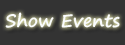
<style>
.page{position:relative;width:125px;height:45px;background:#333333}
.page>*{position:absolute;margin:0}
.t1{font:18px "SegoePrint-Bold";color:#fafcfd}
</style>
<div class="page">
<p class="t1" style="left:5px;top:12px;width:115px;height:16px">Show Events</p>
</div>
